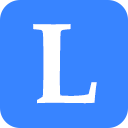
<style>
.page{position:relative;width:128px;height:128px;background:#3884ff}
.page>*{position:absolute;margin:0}
.t1{font:115px "BookAntiqua-Bold";letter-spacing:0.025em;color:#ffffff}
</style>
<div class="page">
<p class="t1" style="left:33px;top:24px;width:64px;height:80px">L</p>
</div>
